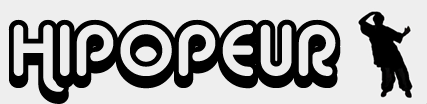
<style>
.page{position:relative;width:427px;height:104px;background:#eeeeee}
.page>*{position:absolute;margin:0}
.t1{font:72px "AlbaSuper";color:#000000}
</style>
<div class="page">
<p class="t1" style="left:8px;top:19px;width:333px;height:85px">HIPOPEUR</p>
</div>
